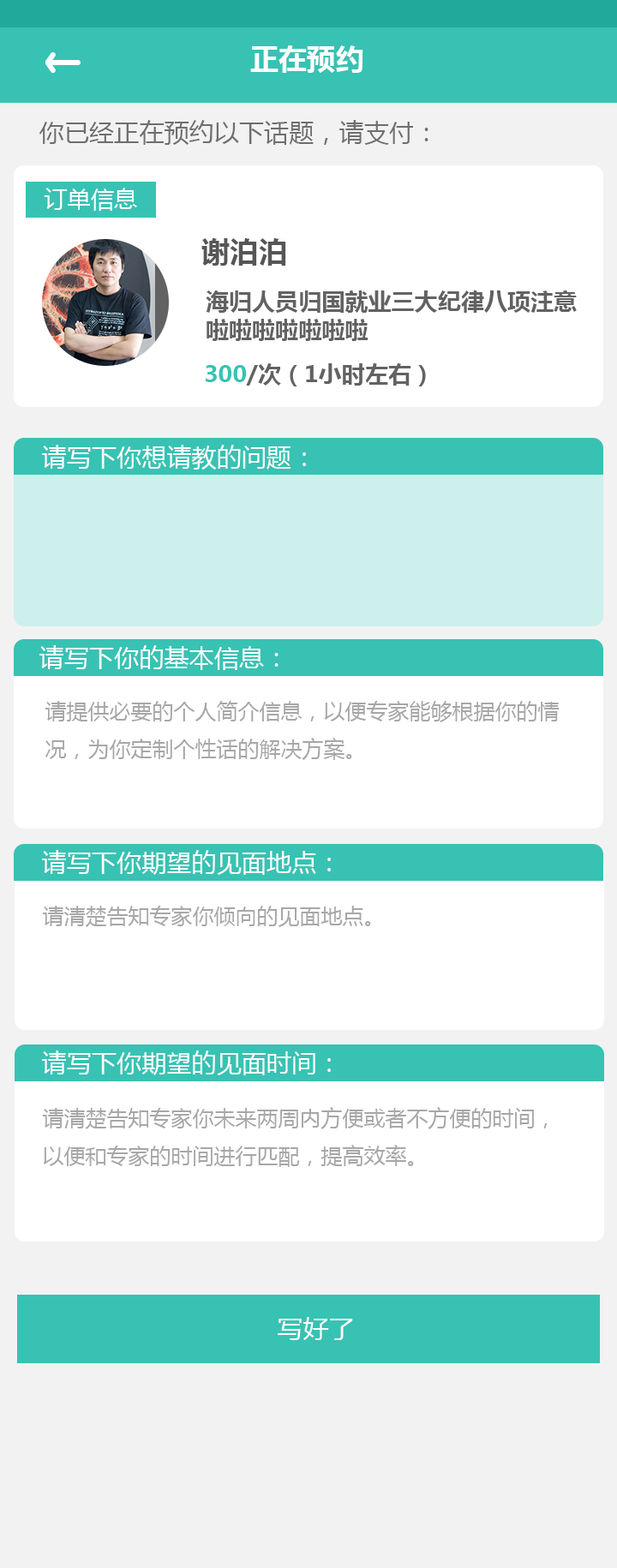
<style>
.page{position:relative;width:617px;height:1568px;background:#ffffff}
.page>*{position:absolute;margin:0}
.t1{font:28.6px "MicrosoftYaHei-Bold";color:#fefefe}
.t2{font:25px "MicrosoftYaHei";color:#6e6e6e}
.t3{font:23.2px "MicrosoftYaHei";color:#fefefe}
.t4{font:28.6px "MicrosoftYaHei-Bold";color:#565656}
.t5{font:23.2px/28.6px "MicrosoftYaHei-Bold";color:#626262}
.t6{font:23.2px "MicrosoftYaHei-Bold";color:#626262}
.t7{font:23.2px "MicrosoftYaHei-Bold";color:#38c2b3}
.t8{font:25px "MicrosoftYaHei";color:#fefefe}
.t9{font:21.4px "MicrosoftYaHei";color:#a7a7a7}
.t10{font:25px "MicrosoftYaHei";color:#fefefe;scale:1.03 1}
</style>
<div class="page">
<p class="t1" style="left:250px;top:45px;width:113px;height:28px">正在预约</p>
<p class="t2" style="left:39px;top:120px;width:389px;height:25px">你已经正在预约以下话题，请支付：</p>
<p class="t3" style="left:44px;top:188px;width:93px;height:23px">订单信息</p>
<p class="t4" style="left:201px;top:238px;width:85px;height:28px">谢泊泊</p>
<p class="t5" style="left:206px;top:290px;width:371px;height:51px">海归人员归国就业三大纪律八项注意<br>啦啦啦啦啦啦啦</p>
<p class="t6" style="left:206px;top:363px;width:220px;height:23px"><span class="t7">300</span>/次（1小时左右）</p>
<p class="t8" style="left:42px;top:445px;width:264px;height:25px">请写下你想请教的问题：</p>
<p class="t8" style="left:39px;top:645px;width:239px;height:25px">请写下你的基本信息：</p>
<p class="t9" style="left:45px;top:701px;width:515px;height:59px">请提供必要的个人简介信息，以便专家能够根据你的情况，为你定制个性话的解决方案。</p>
<p class="t8" style="left:42px;top:850px;width:289px;height:25px">请写下你期望的见面地点：</p>
<p class="t9" style="left:43px;top:906px;width:328px;height:21px">请清楚告知专家你倾向的见面地点。</p>
<p class="t8" style="left:42px;top:1050px;width:289px;height:25px">请写下你期望的见面时间：</p>
<p class="t9" style="left:43px;top:1107px;width:505px;height:60px">请清楚告知专家你未来两周内方便或者不方便的时间，以便和专家的时间进行匹配，提高效率。</p>
<p class="t10" style="left:278px;top:1317px;width:75px;height:23px">写好了</p>
</div>
